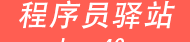
<style>
.page{position:relative;width:190px;height:42px;background:#ff5e52}
.page>*{position:absolute;margin:0}
.t1{font:30px "AdobeHeitiStd-Regular";letter-spacing:0.05em;color:#ffffff;font-style:italic}
</style>
<div class="page">
<p class="t1" style="left:19px;top:0px;width:156px;height:29px">程序员驿站</p>
</div>
